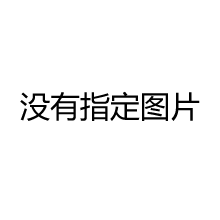
<style>
.page{position:relative;width:220px;height:220px;background:#ffffff}
.page>*{position:absolute;margin:0}
.t1{font:30px "MicrosoftYaHei";color:#010101}
</style>
<div class="page">
<p class="t1" style="left:20px;top:91px;width:180px;height:30px">没有指定图片</p>
</div>
